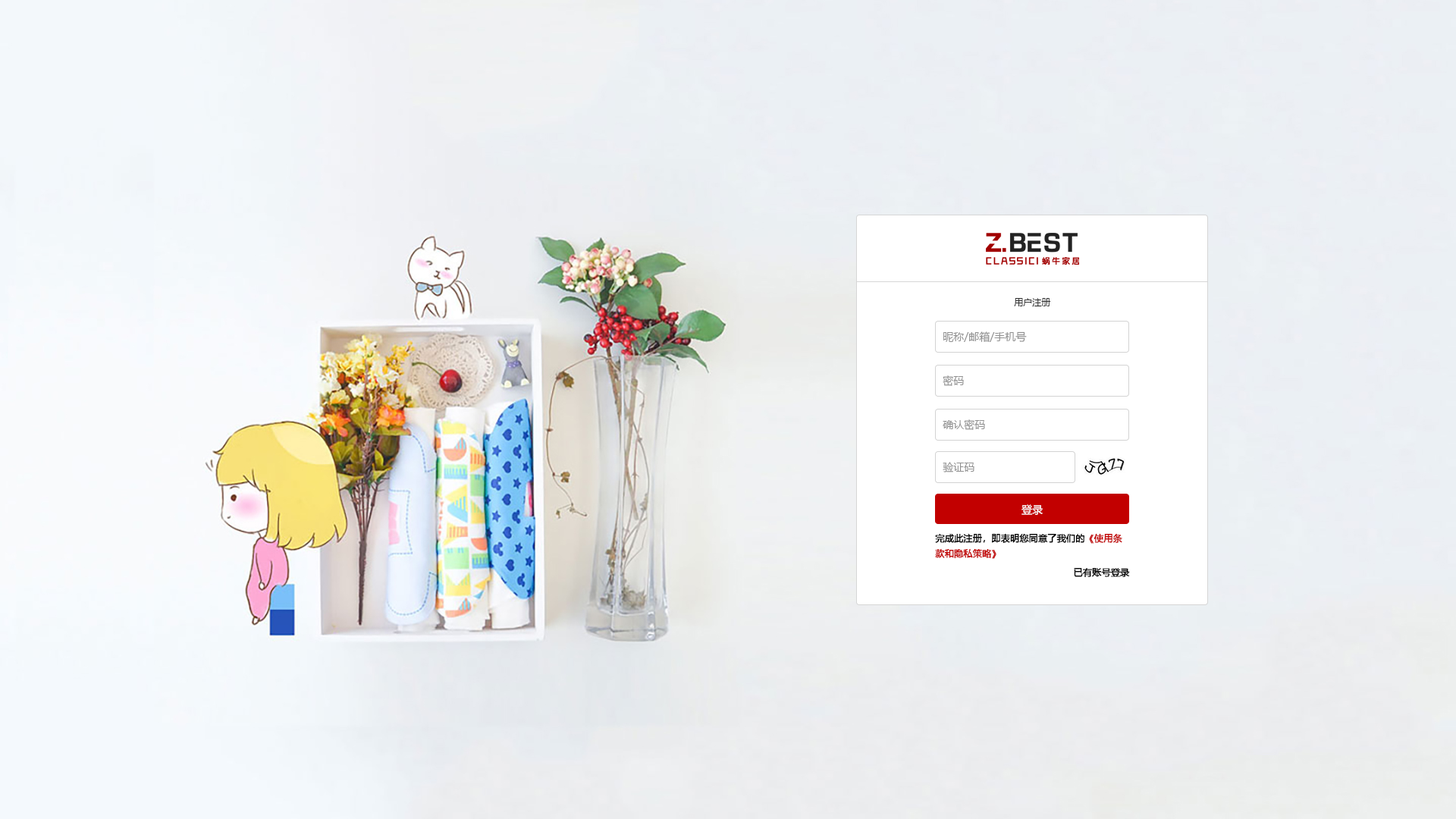
<style>
.page{position:relative;width:1456px;height:819px}
.page>*{position:absolute;margin:0}
.t1{font:9.1px "MicrosoftYaHei";color:#333333}
.t2{font:10.6px "MicrosoftYaHei";color:#929292}
.t3{font:10.6px "MicrosoftYaHei";color:#ffffff}
.t4{font:9.1px/15.2px "MicrosoftYaHei";color:#000000;font-weight:bold}
.t5{font:9.1px/15.2px "MicrosoftYaHei";color:#c20000;font-weight:bold}
.t6{font:9.1px "MicrosoftYaHei";color:#000000;font-weight:bold}
</style>
<div class="page">
<p class="t1" style="left:1014px;top:298px;width:37px;height:9px">用户注册</p>
<p class="t2" style="left:943px;top:331px;width:84px;height:11px">昵称/邮箱/手机号</p>
<p class="t2" style="left:943px;top:375px;width:21px;height:11px">密码</p>
<p class="t2" style="left:943px;top:419px;width:42px;height:11px">确认密码</p>
<p class="t2" style="left:943px;top:462px;width:31px;height:10px">验证码</p>
<p class="t3" style="left:1021px;top:504px;width:22px;height:11px">登录</p>
<p class="t4" style="left:935px;top:533px;width:187px;height:26px">完成此注册，即表明您同意了我们的<span class="t5">《使用条<br>款和隐私策略》</span></p>
<p class="t6" style="left:1074px;top:568px;width:56px;height:9px">已有账号登录</p>
</div>
